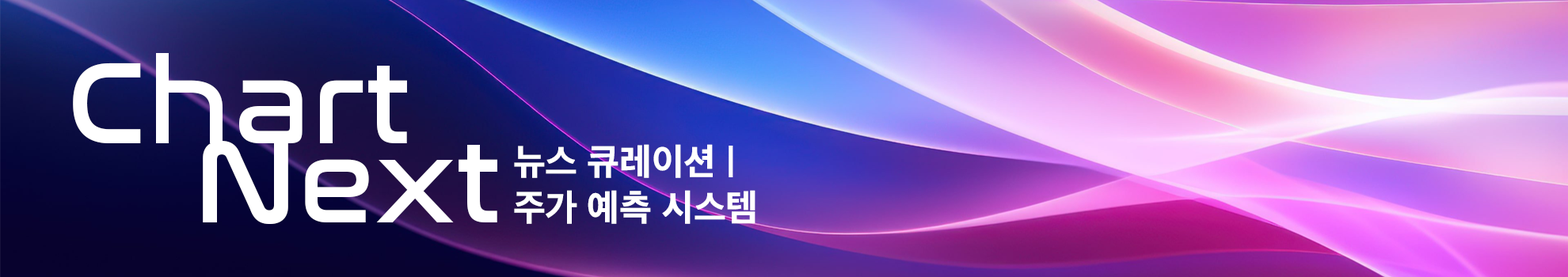
<style>
.page{position:relative;width:1568px;height:277px}
.page>*{position:absolute;margin:0}
.t1{font:118.8px/79.2px "NasalizationRg-Regular";color:#ffffff}
.t2{font:37.2px/45.9px "AppleSDGothicNeoEB00";color:#ffffff}
</style>
<div class="page">
<p class="t1" style="left:73px;top:53px;width:424px;height:171px">Chart <br>    Next</p>
<p class="t2" style="left:514px;top:144px;width:241px;height:80px">뉴스 큐레이션 |<br>주가 예측 시스템</p>
</div>
